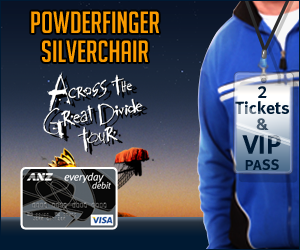
<style>
.page{position:relative;width:300px;height:250px}
.page>*{position:absolute;margin:0}
.t1{font:30px/19px "BigNoodleTitling";color:#f99b00}
.t2{font:17.8px/16.3px "MetaBoldLF-Roman";color:#001a33}
.t3{font:26.9px/16.3px "MetaBoldLF-Roman";color:#001a33}
.t4{font:14.9px/16.3px "MetaBoldLF-Roman";color:#001a33}
</style>
<div class="page">
<p class="t1" style="left:31px;top:11px;width:128px;height:51px;text-align:center">POWDERFINGER<br>SILVERCHAIR</p>
<p class="t2" style="left:235px;top:86px;width:54px;height:84px;text-align:center">2<br>Tickets<br>&amp;<br><span class="t3">VIP<br></span><span class="t4">PASS</span></p>
</div>
